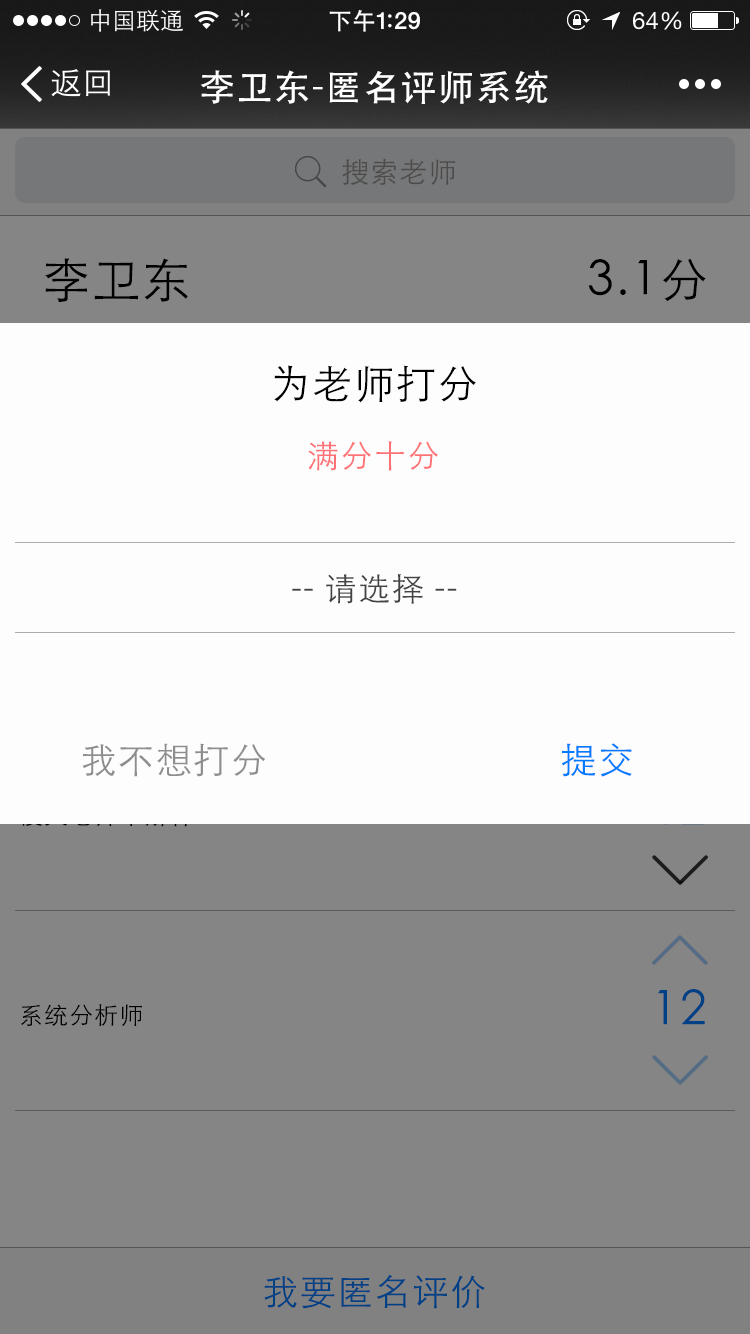
<style>
.page{position:relative;width:750px;height:1334px;background:#858585}
.page>*{position:absolute;margin:0}
.t1{font:36px "STHeiti";letter-spacing:0.045em;color:#ffffff}
.t2{font:28px "STXihei";letter-spacing:0.045em;color:#4c4c4c}
.t3{font:48px "STXihei";letter-spacing:0.045em;color:#000000}
.t4{font:40px "STXihei";letter-spacing:0.045em;color:#000000}
.t5{font:32px "STXihei";letter-spacing:0.045em;color:#fe7174}
.t6{font:32px "STXihei";letter-spacing:0.045em;color:#434343}
.t7{font:36px "STXihei";letter-spacing:0.045em;color:#8e8e8e}
.t8{font:36px "STXihei";letter-spacing:0.045em;color:#007aff}
.t9{font:48px "STXihei";letter-spacing:0.045em;color:#004085}
.t10{font:24px "STXihei";letter-spacing:0.045em;color:#000000}
.t11{font:36px "STXihei";letter-spacing:0.045em;color:#004085}
</style>
<div class="page">
<p class="t1" style="left:200px;top:70px;width:348px;height:34px">李卫东-匿名评师系统</p>
<p class="t2" style="left:342px;top:159px;width:113px;height:26px">搜索老师</p>
<p class="t3" style="left:45px;top:258px;width:143px;height:44px">李卫东</p>
<p class="t3" style="left:588px;top:258px;width:118px;height:43px">3.1分</p>
<p class="t4" style="left:274px;top:365px;width:202px;height:38px">为老师打分</p>
<p class="t5" style="left:308px;top:441px;width:130px;height:30px">满分十分</p>
<p class="t6" style="left:292px;top:574px;width:165px;height:30px">-- 请选择 --</p>
<p class="t7" style="left:82px;top:743px;width:184px;height:34px">我不想打分</p>
<p class="t8" style="left:561px;top:743px;width:71px;height:34px">提交</p>
<p class="t9" style="left:658px;top:989px;width:47px;height:36px">12</p>
<p class="t10" style="left:21px;top:1004px;width:121px;height:22px">系统分析师</p>
<p class="t11" style="left:264px;top:1274px;width:221px;height:35px">我要匿名评价</p>
</div>
